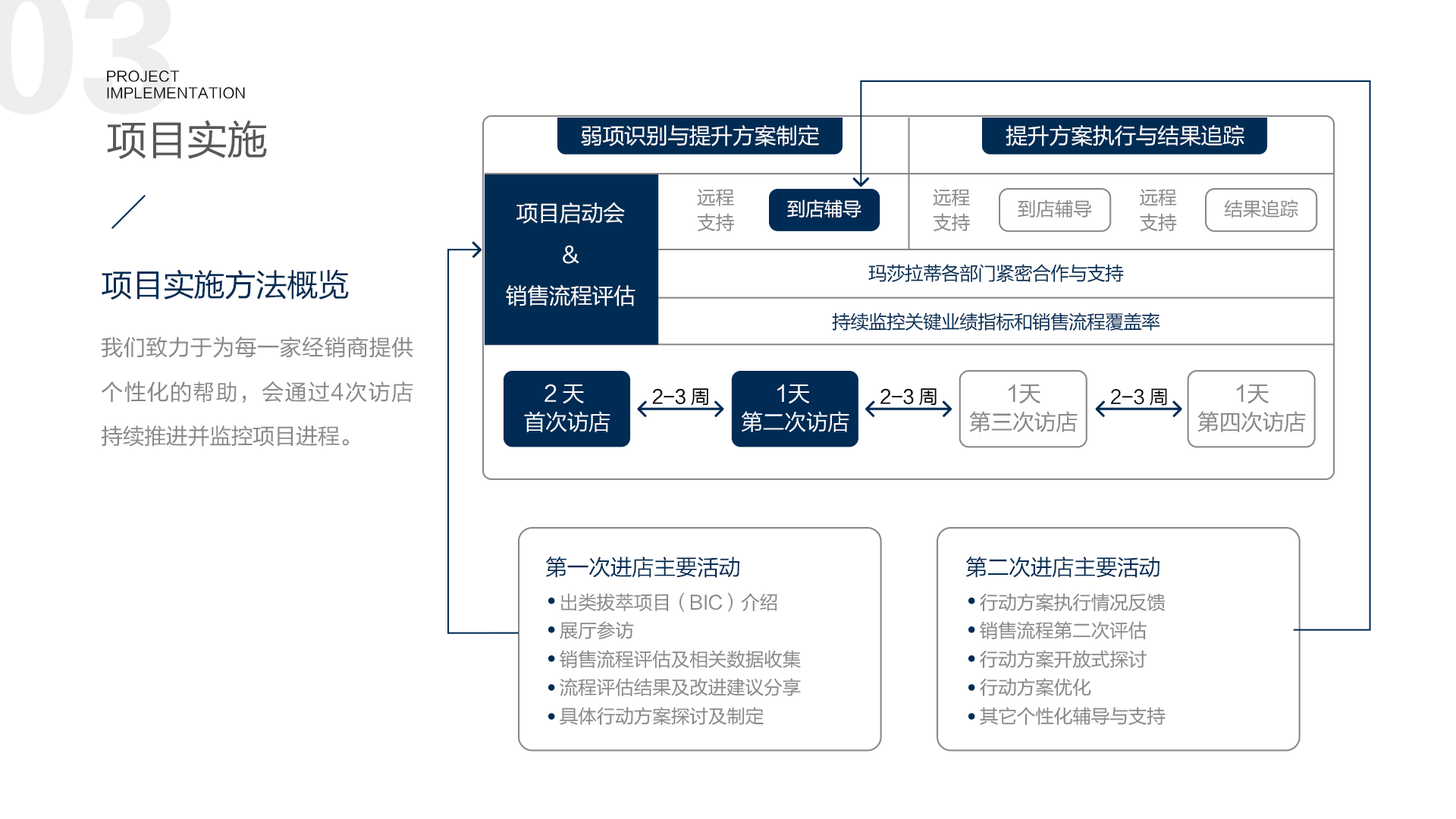
<style>
.page{position:relative;width:1456px;height:819px;background:#ffffff}
.page>*{position:absolute;margin:0}
.t1{font:14.1px "FZLTHJW--GB1-0";letter-spacing:0.02em;color:#000000}
.t2{font:41.1px "FZLTHJW--GB1-0";letter-spacing:-0.02em;color:#595757}
.t3{font:22.1px "FZLTHJW--GB1-0";letter-spacing:-0.02em;color:#ffffff}
.t4{font:19px/25.3px "FZLTHJW--GB1-0";letter-spacing:-0.02em;color:#888888}
.t5{font:22.1px/41.1px "FZLTHJW--GB1-0";letter-spacing:-0.02em;color:#ffffff}
.t6{font:19px "FZLTHJW--GB1-0";letter-spacing:-0.02em;color:#ffffff}
.t7{font:19px "FZLTHJW--GB1-0";letter-spacing:-0.02em;color:#888888}
.t8{font:31.6px "FZLTHJW--GB1-0";letter-spacing:-0.02em;color:#002c54}
.t9{font:19px "FZLTHJW--GB1-0";letter-spacing:-0.04em;color:#002c54}
.t10{font:22.1px/44.2px "FZLTHJW--GB1-0";letter-spacing:-0.02em;color:#888888}
.t11{font:19px "FZLTHJW--GB1-0";letter-spacing:-0.02em;color:#000000}
.t12{font:22.1px "FZLTHJW--GB1-0";letter-spacing:-0.02em;color:#002c54}
.t13{font:19px/28.4px "FZLTHJW--GB1-0";letter-spacing:-0.02em;color:#888888}
</style>
<div class="page">
<p class="t1" style="left:107px;top:70px;width:138px;height:29px">PROJECT <br>IMPLEMENTATION</p>
<p class="t2" style="left:107px;top:120px;width:160px;height:39px">项目实施</p>
<p class="t3" style="left:581px;top:125px;width:238px;height:21px">弱项识别与提升方案制定</p>
<p class="t3" style="left:1006px;top:125px;width:238px;height:21px">提升方案执行与结果追踪</p>
<p class="t4" style="left:697px;top:189px;width:37px;height:42px">远程<br>支持</p>
<p class="t4" style="left:933px;top:189px;width:37px;height:42px">远程<br>支持</p>
<p class="t4" style="left:1140px;top:189px;width:37px;height:42px">远程<br>支持</p>
<p class="t5" style="left:506px;top:202px;width:129px;height:104px;text-align:center">项目启动会<br>&amp;<br>销售流程评估</p>
<p class="t6" style="left:787px;top:199px;width:74px;height:19px">到店辅导</p>
<p class="t7" style="left:1018px;top:199px;width:74px;height:19px">到店辅导</p>
<p class="t7" style="left:1224px;top:199px;width:74px;height:19px">结果追踪</p>
<p class="t8" style="left:102px;top:269px;width:247px;height:31px">项目实施方法概览</p>
<p class="t9" style="left:868px;top:264px;width:256px;height:18px">玛莎拉蒂各部门紧密合作与支持</p>
<p class="t9" style="left:832px;top:312px;width:328px;height:19px">持续监控关键业绩指标和销售流程覆盖率</p>
<p class="t10" style="left:101px;top:337px;width:312px;height:110px;text-align:justify">我们致力于为每一家经销商提供个性化的帮助，会通过4次访店持续推进并监控项目进程。</p>
<p class="t11" style="left:1110px;top:388px;width:57px;height:18px">2-3 周</p>
<p class="t12" style="left:546px;top:557px;width:193px;height:21px">第一次进店主要活动</p>
<p class="t12" style="left:966px;top:557px;width:193px;height:21px">第二次进店主要活动</p>
<p class="t13" style="left:560px;top:592px;width:241px;height:134px">出类拔萃项目（BIC）介绍<br>展厅参访<br>销售流程评估及相关数据收集<br>流程评估结果及改进建议分享<br>具体行动方案探讨及制定</p>
<p class="t13" style="left:980px;top:593px;width:186px;height:132px">行动方案执行情况反馈<br>销售流程第二次评估<br>行动方案开放式探讨<br>行动方案优化<br>其它个性化辅导与支持</p>
</div>
